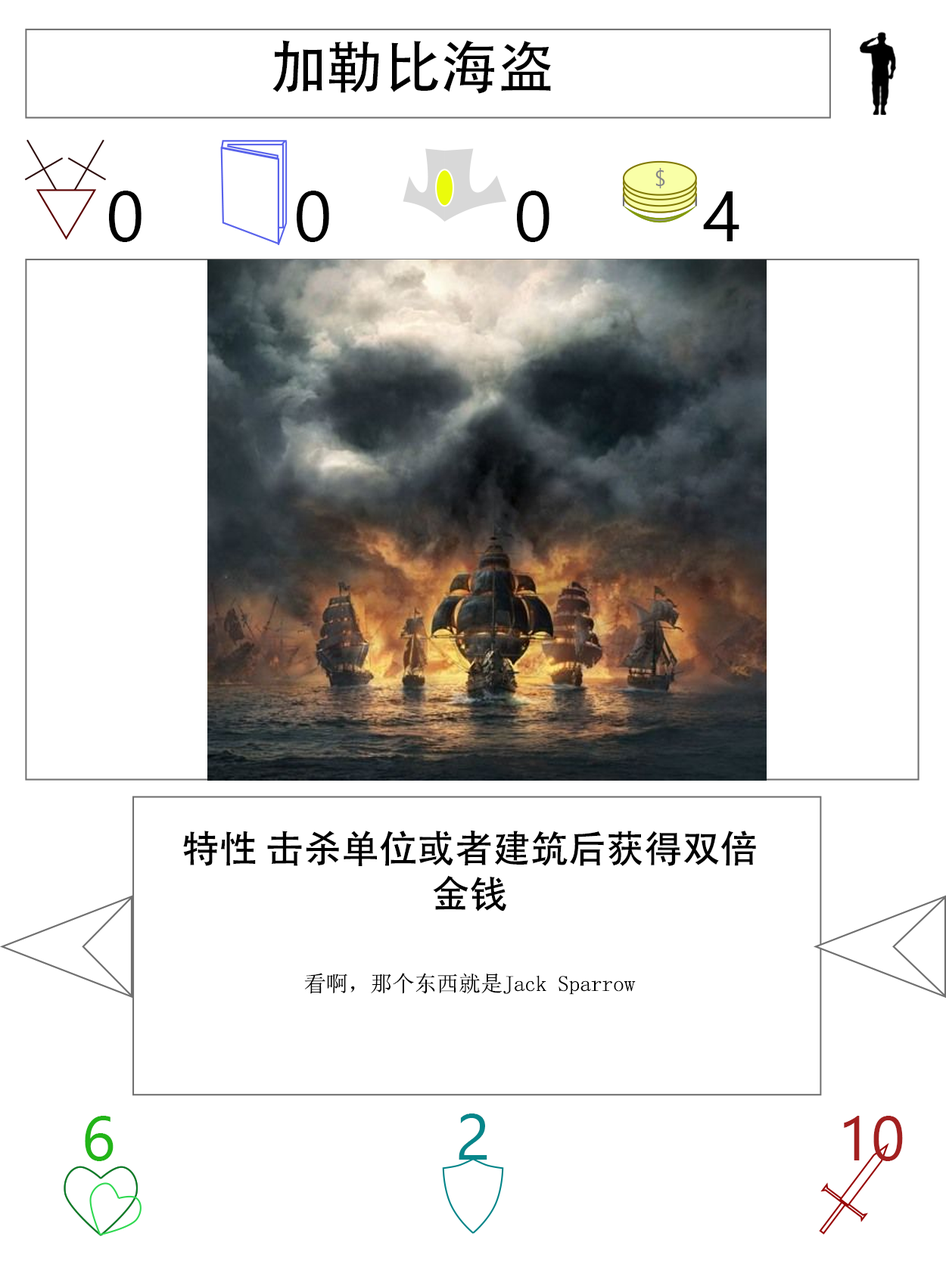
<style>
.page{position:relative;width:946px;height:1261px;background:#ffffff}
.page>*{position:absolute;margin:0}
.t1{font:56.7px "AdobeHeitiStd-Regular";color:#000000}
.t2{font:70.9px "SegoeUI";color:#000000}
.t3{font:22.1px "NSimSun";color:#000000}
.t4{font:37.8px "AdobeHeitiStd-Regular";color:#000000}
.t5{font:63px "SegoeUI";color:#22b518}
.t6{font:64.6px "SegoeUI";color:#05868a}
.t7{font:63px "SegoeUI";color:#a32020}
</style>
<div class="page">
<p class="t1" style="left:272px;top:40px;width:279px;height:54px">加勒比海盗</p>
<p class="t2" style="left:109px;top:191px;width:32px;height:51px">0</p>
<p class="t2" style="left:297px;top:191px;width:32px;height:51px">0</p>
<p class="t2" style="left:517px;top:191px;width:32px;height:51px">0</p>
<p class="t2" style="left:703px;top:191px;width:36px;height:50px">4</p>
<p class="t3" style="left:183px;top:830px;width:573px;height:165px;text-align:center"><span class="t4">特性 击杀单位或者建筑后获得双倍金钱<br><br></span>看啊，那个东西就是Jack Sparrow</p>
<p class="t5" style="left:85px;top:1116px;width:28px;height:45px">6</p>
<p class="t6" style="left:458px;top:1114px;width:29px;height:46px">2</p>
<p class="t7" style="left:843px;top:1116px;width:59px;height:45px">10</p>
</div>
